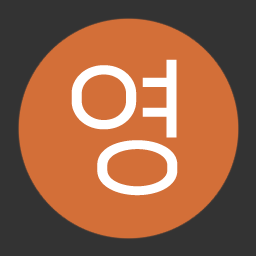
<style>
.page{position:relative;width:256px;height:256px;background:#d36f38}
.page>*{position:absolute;margin:0}
.t1{font:144px "NanumSquareOTFR";color:#ffffff}
</style>
<div class="page">
<p class="t1" style="left:71px;top:59px;width:107px;height:137px">영</p>
</div>
